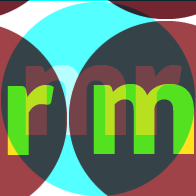
<style>
.page{position:relative;width:196px;height:196px;background:#354349}
.page>*{position:absolute;margin:0}
.t1{font:133.5px "Lato-Black"}
</style>
<div class="page">
<p class="t1" style="left:25px;top:64px;width:101px;height:70px">m</p>
<p class="t1" style="left:135px;top:64px;width:47px;height:70px">r</p>
</div>
